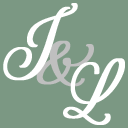
<style>
.page{position:relative;width:128px;height:128px;background:#7b9883}
.page>*{position:absolute;margin:0}
.t1{font:84px "RougeScript-Regular";color:#ffffff;font-weight:bold;font-style:italic}
.t2{font:84px "RougeScript-Regular";color:#bfbfbf;font-weight:bold;font-style:italic}
</style>
<div class="page">
<p class="t1" style="left:3px;top:3px;width:75px;height:78px">J</p>
<p class="t2" style="left:36px;top:40px;width:58px;height:47px">&amp;</p>
<p class="t1" style="left:63px;top:58px;width:62px;height:67px">L</p>
</div>
